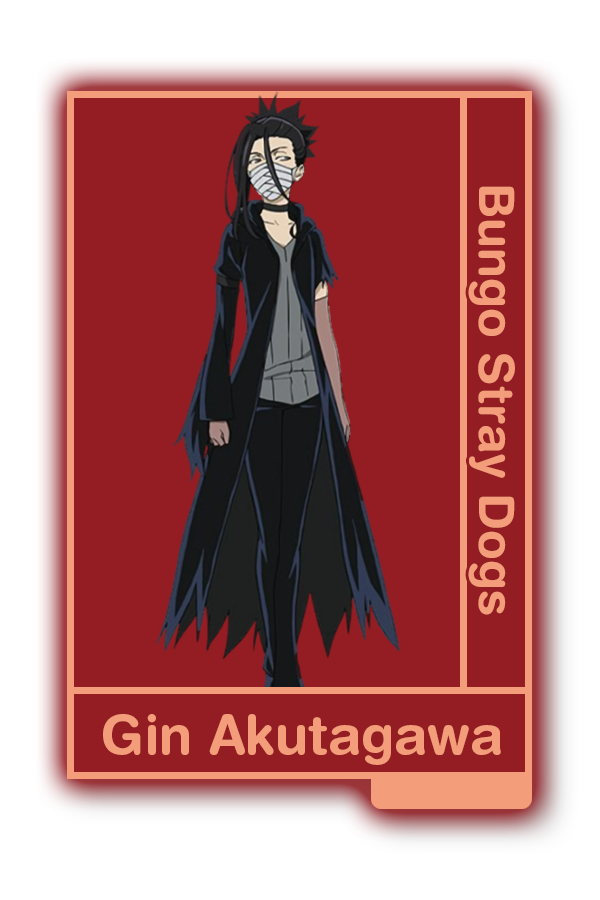
<style>
.page{position:relative;width:600px;height:900px;background:#941d23}
.page>*{position:absolute;margin:0}
.t1{font:48.8px "HelveticaRounded-Bold";color:#f39d7b}
.t2{font:54.3px "HelveticaRounded-Bold";color:#f39d7b}
</style>
<div class="page">
<p class="t1" style="left:468px;top:186px;width:47px;height:429px;rotate:90deg">Bungo Stray Dogs</p>
<p class="t2" style="left:103px;top:714px;width:398px;height:51px">Gin Akutagawa</p>
</div>
